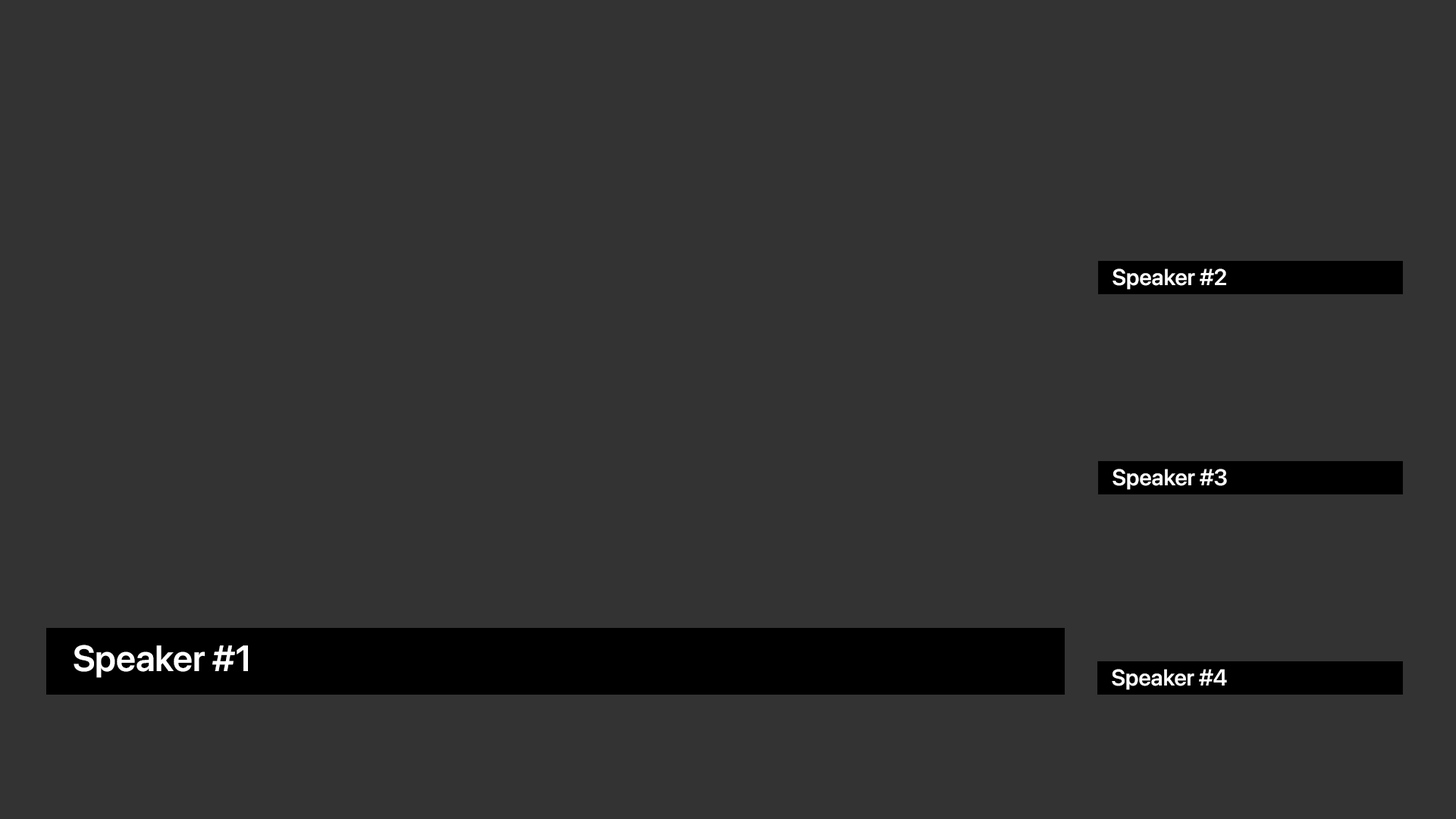
<style>
.page{position:relative;width:1456px;height:819px;background:#333333}
.page>*{position:absolute;margin:0}
.t1{font:22.7px "SFProDisplay-Semibold";color:#ffffff}
.t2{font:36.4px "SFProDisplay-Semibold";color:#ffffff}
</style>
<div class="page">
<p class="t1" style="left:1112px;top:268px;width:114px;height:22px">Speaker #2</p>
<p class="t1" style="left:1112px;top:469px;width:115px;height:21px">Speaker #3</p>
<p class="t2" style="left:74px;top:645px;width:174px;height:33px">Speaker #1</p>
<p class="t1" style="left:1112px;top:669px;width:115px;height:21px">Speaker #4</p>
</div>
